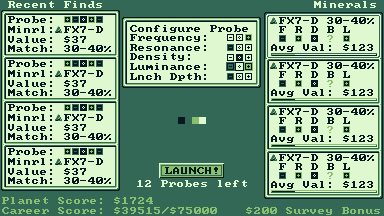
<style>
.page{position:relative;width:384px;height:216px;background:#e0f8d0}
.page>*{position:absolute;margin:0}
.t1{font:8px "Mx437_IBM_BIOS";color:#e0f8d0}
.t2{font:8px "Mx437_IBM_BIOS";color:#081820}
.t3{font:8px "Mx437_IBM_BIOS";color:#88c070}
</style>
<div class="page">
<p class="t1" style="left:8px;top:1px;width:94px;height:7px">Recent Finds</p>
<p class="t1" style="left:314px;top:1px;width:62px;height:7px">Minerals</p>
<p class="t2" style="left:8px;top:16px;width:103px;height:36px">Probe:<br>Minrl: FX7-D<br>Value: $37<br>Match: 30-40%</p>
<p class="t2" style="left:271px;top:16px;width:103px;height:37px">FX7-D 30-40%<br> F R D B L<br><br>Avg Val: $123</p>
<p class="t2" style="left:130px;top:25px;width:118px;height:56px">Configure Probe<br>Frequency:<br>Resonance:<br>Density:<br>Luminance:<br>Lnch Dpth:</p>
<p class="t1" style="left:137px;top:180px;width:110px;height:7px">12 Probes left</p>
<p class="t3" style="left:2px;top:197px;width:215px;height:17px">Planet Score: $1724<br>Career Score: $39515/$75000</p>
<p class="t3" style="left:246px;top:207px;width:134px;height:8px">$200 Survey Bonus</p>
</div>
